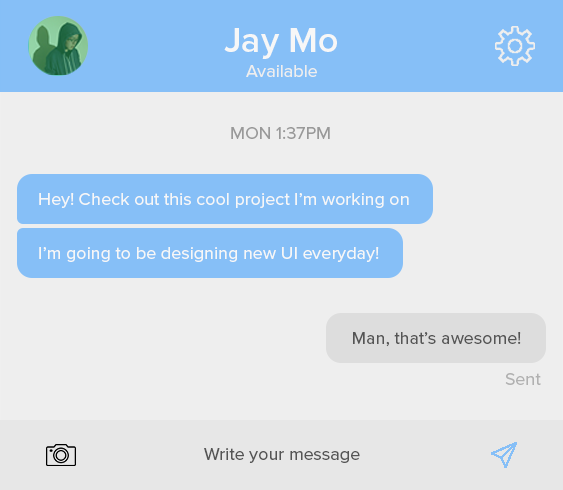
<style>
.page{position:relative;width:563px;height:490px;background:#eeeeee}
.page>*{position:absolute;margin:0}
.t1{font:36px "ProximaNova-Semibold";color:#f7f7f7}
.t2{font:18px "ProximaNova-Regular";color:#eeeeee}
.t3{font:18px "ProximaNova-Regular";color:#999999}
.t4{font:18px "ProximaNova-Regular";color:#f7f7f7}
.t5{font:18px "ProximaNova-Regular";color:#555555}
</style>
<div class="page">
<p class="t1" style="left:224px;top:28px;width:113px;height:31px">Jay Mo</p>
<p class="t2" style="left:246px;top:65px;width:71px;height:12px">Available</p>
<p class="t3" style="left:231px;top:127px;width:99px;height:12px">MON 1:37PM</p>
<p class="t4" style="left:39px;top:193px;width:370px;height:15px">Hey! Check out this cool project I’m working on</p>
<p class="t4" style="left:39px;top:247px;width:340px;height:15px">I’m going to be designing new UI everyday!</p>
<p class="t5" style="left:353px;top:332px;width:168px;height:15px">Man, that’s awesome!</p>
<p class="t3" style="left:505px;top:373px;width:36px;height:12px;opacity:0.75">Sent</p>
<p class="t5" style="left:204px;top:448px;width:156px;height:15px">Write your message</p>
</div>
